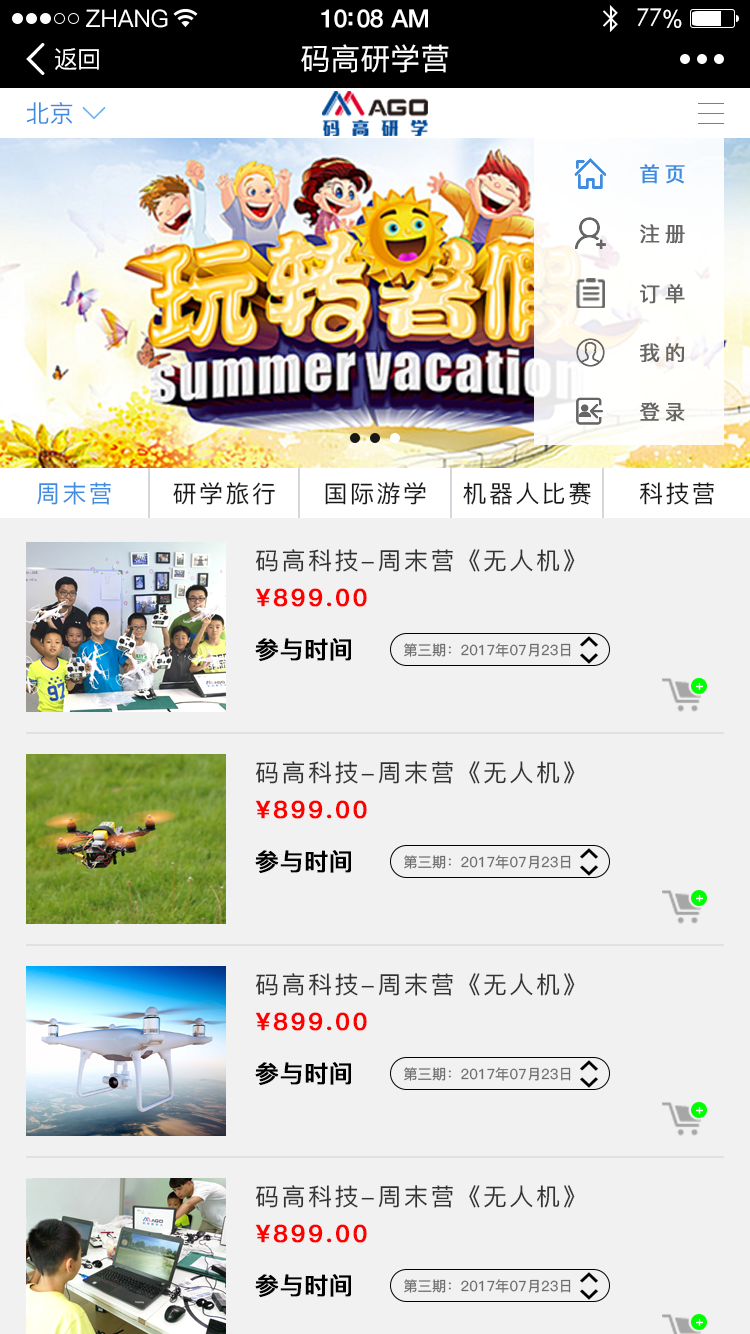
<style>
.page{position:relative;width:750px;height:1334px;background:#f1f1f1}
.page>*{position:absolute;margin:0}
.t1{font:24px "PingFang-SC-Medium";color:#ffffff}
.t2{font:25px "HelveticaNeue-Medium";letter-spacing:-0.02em;color:#ffffff}
.t3{font:24px "STXihei";letter-spacing:-0.02em;color:#ffffff}
.t4{font:24px "ArialUnicodeMS";letter-spacing:-0.02em;color:#ffffff}
.t5{font:24px "PingFang-SC-Medium";letter-spacing:-0.02em;color:#ffffff}
.t6{font:30px "PingFang-SC-Medium";color:#ffffff}
.t7{font:24px "PingFang-SC-Medium";color:#408ce1}
.t8{font:20.5px "PingFang-SC-Medium";letter-spacing:0.2em;color:#408ce1;font-weight:bold}
.t9{font:20.5px "PingFang-SC-Medium";letter-spacing:0.2em;color:#666666;font-weight:bold}
.t10{font:24px "PingFang-SC-Medium";letter-spacing:0.1em;color:#408ce1}
.t11{font:24px "PingFang-SC-Medium";letter-spacing:0.1em;color:#181818}
.t12{font:24px "PingFang-SC-Medium";letter-spacing:0.1em;color:#333333}
.t13{font:24px "PingFang-SC-Bold";letter-spacing:0.1em;color:#fe0000;font-weight:bold}
.t14{font:24px "PingFang-SC-Bold";color:#000000;font-weight:bold}
.t15{font:14px "PingFang-SC-Medium";color:#6c6c6c}
</style>
<div class="page">
<p class="t1" style="left:86px;top:9px;width:82px;height:19px">ZHANG</p>
<p class="t2" style="left:321px;top:9px;width:107px;height:19px">10:08 AM</p>
<p class="t3" style="left:637px;top:8px;width:45px;height:20px">77<span class="t4">%</span></p>
<p class="t5" style="left:55px;top:48px;width:44px;height:22px">返回</p>
<p class="t6" style="left:301px;top:44px;width:148px;height:29px">码高研学营</p>
<p class="t7" style="left:26px;top:102px;width:47px;height:22px">北京</p>
<p class="t8" style="left:640px;top:164px;width:45px;height:20px">首页</p>
<p class="t9" style="left:640px;top:224px;width:45px;height:20px">注册</p>
<p class="t9" style="left:640px;top:284px;width:45px;height:20px">订单</p>
<p class="t9" style="left:640px;top:343px;width:44px;height:19px">我的</p>
<p class="t9" style="left:640px;top:402px;width:45px;height:20px">登录</p>
<p class="t10" style="left:37px;top:482px;width:74px;height:23px">周末营</p>
<p class="t11" style="left:173px;top:482px;width:102px;height:23px">研学旅行</p>
<p class="t11" style="left:325px;top:482px;width:101px;height:23px">国际游学</p>
<p class="t11" style="left:463px;top:482px;width:128px;height:23px">机器人比赛</p>
<p class="t11" style="left:639px;top:482px;width:75px;height:23px">科技营</p>
<p class="t12" style="left:256px;top:549px;width:319px;height:23px">码高科技-周末营《无人机》</p>
<p class="t13" style="left:255px;top:588px;width:112px;height:19px">¥899.00</p>
<p class="t14" style="left:255px;top:638px;width:96px;height:23px">参与时间</p>
<p class="t15" style="left:404px;top:643px;width:167px;height:14px">第三期：2017年07月23日</p>
<p class="t12" style="left:256px;top:761px;width:319px;height:23px">码高科技-周末营《无人机》</p>
<p class="t13" style="left:255px;top:800px;width:112px;height:19px">¥899.00</p>
<p class="t14" style="left:255px;top:850px;width:96px;height:23px">参与时间</p>
<p class="t15" style="left:404px;top:855px;width:167px;height:14px">第三期：2017年07月23日</p>
<p class="t12" style="left:256px;top:973px;width:319px;height:23px">码高科技-周末营《无人机》</p>
<p class="t13" style="left:255px;top:1012px;width:112px;height:19px">¥899.00</p>
<p class="t14" style="left:255px;top:1062px;width:96px;height:23px">参与时间</p>
<p class="t15" style="left:404px;top:1067px;width:167px;height:14px">第三期：2017年07月23日</p>
<p class="t12" style="left:256px;top:1185px;width:319px;height:23px">码高科技-周末营《无人机》</p>
<p class="t13" style="left:255px;top:1224px;width:112px;height:19px">¥899.00</p>
<p class="t14" style="left:255px;top:1274px;width:96px;height:23px">参与时间</p>
<p class="t15" style="left:404px;top:1279px;width:167px;height:14px">第三期：2017年07月23日</p>
</div>
